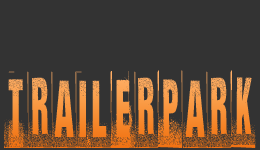
<style>
.page{position:relative;width:260px;height:150px;background:#333333}
.page>*{position:absolute;margin:0}
.t1{font:83px "ghettomarquee";scale:0.5 1}
</style>
<div class="page">
<p class="t1" style="left:4px;top:70px;width:252px;height:78px">trailerpark</p>
</div>
